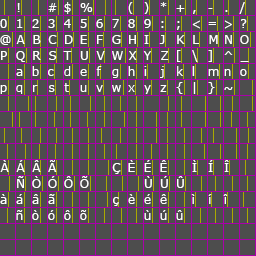
<style>
.page{position:relative;width:256px;height:256px;background:#4d4d4d}
.page>*{position:absolute;margin:0}
.t1{font:12px "Verdana";color:#ffffff}
.t2{font:12px "Verdana";color:#ffffff;text-transform:uppercase}
</style>
<div class="page">
<p class="t1" style="left:17px;top:3px;width:3px;height:9px">!</p>
<p class="t1" style="left:48px;top:3px;width:9px;height:9px">#</p>
<p class="t1" style="left:64px;top:2px;width:7px;height:12px">$</p>
<p class="t1" style="left:80px;top:3px;width:13px;height:9px">%</p>
<p class="t1" style="left:128px;top:2px;width:5px;height:12px">(</p>
<p class="t1" style="left:144px;top:2px;width:5px;height:12px">)</p>
<p class="t1" style="left:160px;top:2px;width:7px;height:5px">*</p>
<p class="t1" style="left:176px;top:5px;width:9px;height:7px">+</p>
<p class="t1" style="left:239px;top:2px;width:6px;height:12px">/</p>
<p class="t1" style="left:193px;top:10px;width:3px;height:4px">,</p>
<p class="t1" style="left:208px;top:8px;width:5px;height:1px">-</p>
<p class="t1" style="left:225px;top:10px;width:3px;height:2px">.</p>
<p class="t1" style="left:0px;top:19px;width:7px;height:9px">0</p>
<p class="t1" style="left:17px;top:19px;width:6px;height:9px">1</p>
<p class="t1" style="left:32px;top:19px;width:7px;height:9px">2</p>
<p class="t1" style="left:48px;top:19px;width:7px;height:9px">3</p>
<p class="t1" style="left:64px;top:19px;width:7px;height:9px">4</p>
<p class="t1" style="left:80px;top:19px;width:7px;height:9px">5</p>
<p class="t1" style="left:96px;top:19px;width:7px;height:9px">6</p>
<p class="t1" style="left:112px;top:19px;width:7px;height:9px">7</p>
<p class="t1" style="left:128px;top:19px;width:7px;height:9px">8</p>
<p class="t1" style="left:144px;top:19px;width:7px;height:9px">9</p>
<p class="t1" style="left:161px;top:21px;width:3px;height:7px">:</p>
<p class="t1" style="left:177px;top:21px;width:3px;height:9px">;</p>
<p class="t1" style="left:192px;top:20px;width:8px;height:9px">&lt;</p>
<p class="t1" style="left:208px;top:22px;width:8px;height:3px">=</p>
<p class="t1" style="left:224px;top:20px;width:8px;height:9px">&gt;</p>
<p class="t1" style="left:241px;top:19px;width:6px;height:9px">?</p>
<p class="t1" style="left:0px;top:35px;width:11px;height:10px">@</p>
<p class="t2" style="left:16px;top:35px;width:9px;height:9px">a</p>
<p class="t2" style="left:33px;top:35px;width:8px;height:9px">b</p>
<p class="t2" style="left:48px;top:35px;width:9px;height:9px">c</p>
<p class="t2" style="left:65px;top:35px;width:8px;height:9px">d</p>
<p class="t2" style="left:80px;top:35px;width:7px;height:9px">e</p>
<p class="t2" style="left:97px;top:35px;width:6px;height:9px">f</p>
<p class="t2" style="left:112px;top:35px;width:9px;height:9px">g</p>
<p class="t2" style="left:129px;top:35px;width:7px;height:9px">h</p>
<p class="t2" style="left:144px;top:35px;width:5px;height:9px">i</p>
<p class="t2" style="left:159px;top:35px;width:6px;height:9px">j</p>
<p class="t2" style="left:177px;top:35px;width:8px;height:9px">k</p>
<p class="t2" style="left:193px;top:35px;width:6px;height:9px">l</p>
<p class="t2" style="left:209px;top:35px;width:9px;height:9px">m</p>
<p class="t2" style="left:225px;top:35px;width:7px;height:9px">n</p>
<p class="t2" style="left:240px;top:35px;width:9px;height:9px">o</p>
<p class="t2" style="left:1px;top:51px;width:6px;height:9px">p</p>
<p class="t2" style="left:16px;top:51px;width:9px;height:11px">q</p>
<p class="t2" style="left:33px;top:51px;width:8px;height:9px">r</p>
<p class="t2" style="left:49px;top:51px;width:8px;height:9px">s</p>
<p class="t2" style="left:63px;top:51px;width:9px;height:9px">t</p>
<p class="t2" style="left:80px;top:51px;width:8px;height:9px">u</p>
<p class="t2" style="left:96px;top:51px;width:9px;height:9px">v</p>
<p class="t2" style="left:112px;top:51px;width:11px;height:9px">w</p>
<p class="t2" style="left:128px;top:51px;width:9px;height:9px">x</p>
<p class="t2" style="left:143px;top:51px;width:8px;height:9px">y</p>
<p class="t2" style="left:161px;top:51px;width:8px;height:9px">z</p>
<p class="t2" style="left:177px;top:50px;width:4px;height:12px">[</p>
<p class="t2" style="left:192px;top:50px;width:6px;height:12px">\</p>
<p class="t2" style="left:208px;top:50px;width:4px;height:12px">]</p>
<p class="t2" style="left:224px;top:51px;width:9px;height:4px">^</p>
<p class="t2" style="left:240px;top:61px;width:9px;height:1px">_</p>
<p class="t1" style="left:16px;top:69px;width:7px;height:7px">a</p>
<p class="t1" style="left:32px;top:66px;width:7px;height:10px">b</p>
<p class="t1" style="left:48px;top:69px;width:6px;height:7px">c</p>
<p class="t1" style="left:64px;top:66px;width:7px;height:10px">d</p>
<p class="t1" style="left:80px;top:69px;width:7px;height:7px">e</p>
<p class="t1" style="left:96px;top:66px;width:6px;height:10px">f</p>
<p class="t1" style="left:112px;top:69px;width:7px;height:9px">g</p>
<p class="t1" style="left:128px;top:66px;width:7px;height:10px">h</p>
<p class="t1" style="left:144px;top:66px;width:3px;height:10px">i</p>
<p class="t1" style="left:160px;top:66px;width:4px;height:12px">j</p>
<p class="t1" style="left:177px;top:66px;width:6px;height:10px">k</p>
<p class="t1" style="left:192px;top:66px;width:3px;height:10px">l</p>
<p class="t1" style="left:208px;top:69px;width:11px;height:7px">m</p>
<p class="t1" style="left:224px;top:69px;width:7px;height:7px">n</p>
<p class="t1" style="left:240px;top:69px;width:7px;height:7px">o</p>
<p class="t1" style="left:0px;top:85px;width:7px;height:9px">p</p>
<p class="t1" style="left:16px;top:85px;width:7px;height:9px">q</p>
<p class="t1" style="left:33px;top:85px;width:5px;height:7px">r</p>
<p class="t1" style="left:49px;top:85px;width:6px;height:7px">s</p>
<p class="t1" style="left:64px;top:83px;width:5px;height:9px">t</p>
<p class="t1" style="left:80px;top:85px;width:7px;height:7px">u</p>
<p class="t1" style="left:96px;top:85px;width:7px;height:7px">v</p>
<p class="t1" style="left:112px;top:85px;width:9px;height:7px">w</p>
<p class="t1" style="left:128px;top:85px;width:7px;height:7px">x</p>
<p class="t1" style="left:144px;top:85px;width:7px;height:9px">y</p>
<p class="t1" style="left:160px;top:85px;width:7px;height:7px">z</p>
<p class="t1" style="left:176px;top:82px;width:7px;height:12px">{</p>
<p class="t1" style="left:193px;top:82px;width:3px;height:12px">|</p>
<p class="t1" style="left:208px;top:82px;width:7px;height:12px">}</p>
<p class="t1" style="left:224px;top:87px;width:9px;height:3px">~</p>
<p class="t2" style="left:0px;top:160px;width:9px;height:12px">à</p>
<p class="t2" style="left:16px;top:160px;width:9px;height:12px">á</p>
<p class="t2" style="left:32px;top:160px;width:9px;height:12px">â</p>
<p class="t2" style="left:48px;top:160px;width:9px;height:12px">ã</p>
<p class="t2" style="left:128px;top:160px;width:7px;height:12px">è</p>
<p class="t2" style="left:144px;top:160px;width:7px;height:12px">é</p>
<p class="t2" style="left:160px;top:160px;width:7px;height:12px">ê</p>
<p class="t2" style="left:192px;top:160px;width:5px;height:12px">ì</p>
<p class="t2" style="left:208px;top:160px;width:5px;height:12px">Í</p>
<p class="t2" style="left:224px;top:160px;width:5px;height:12px">î</p>
<p class="t2" style="left:112px;top:163px;width:9px;height:11px">ç</p>
<p class="t2" style="left:17px;top:176px;width:7px;height:12px">ñ</p>
<p class="t2" style="left:32px;top:176px;width:9px;height:12px">ò</p>
<p class="t2" style="left:48px;top:176px;width:9px;height:12px">Ó</p>
<p class="t2" style="left:64px;top:176px;width:9px;height:12px">ô</p>
<p class="t2" style="left:80px;top:176px;width:9px;height:12px">õ</p>
<p class="t2" style="left:144px;top:176px;width:8px;height:12px">ù</p>
<p class="t2" style="left:160px;top:176px;width:8px;height:12px">ú</p>
<p class="t2" style="left:177px;top:176px;width:7px;height:12px">û</p>
<p class="t1" style="left:0px;top:194px;width:7px;height:10px">à</p>
<p class="t1" style="left:16px;top:194px;width:7px;height:10px">á</p>
<p class="t1" style="left:32px;top:194px;width:7px;height:10px">â</p>
<p class="t1" style="left:48px;top:194px;width:7px;height:10px">ã</p>
<p class="t1" style="left:113px;top:197px;width:6px;height:9px">ç</p>
<p class="t1" style="left:128px;top:194px;width:7px;height:10px">è</p>
<p class="t1" style="left:144px;top:194px;width:7px;height:10px">é</p>
<p class="t1" style="left:160px;top:194px;width:7px;height:10px">ê</p>
<p class="t1" style="left:191px;top:194px;width:4px;height:10px">ì</p>
<p class="t1" style="left:208px;top:194px;width:4px;height:10px;rotate:180deg">ì</p>
<p class="t1" style="left:223px;top:194px;width:5px;height:10px">î</p>
<p class="t1" style="left:16px;top:210px;width:7px;height:10px">ñ</p>
<p class="t1" style="left:32px;top:210px;width:7px;height:10px">ò</p>
<p class="t1" style="left:48px;top:210px;width:7px;height:10px">ó</p>
<p class="t1" style="left:64px;top:210px;width:7px;height:10px">ô</p>
<p class="t1" style="left:80px;top:210px;width:7px;height:10px">õ</p>
<p class="t1" style="left:144px;top:210px;width:7px;height:10px">ù</p>
<p class="t1" style="left:160px;top:210px;width:7px;height:10px">ú</p>
<p class="t1" style="left:176px;top:210px;width:7px;height:10px">û</p>
</div>
